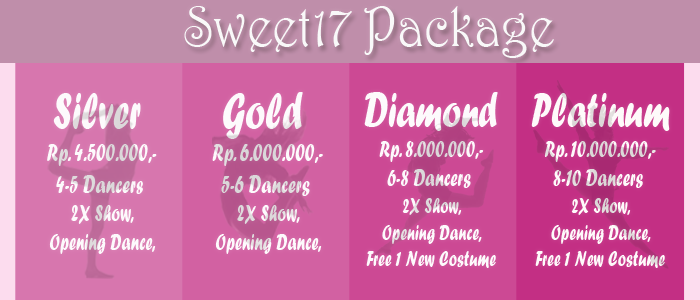
<style>
.page{position:relative;width:700px;height:300px}
.page>*{position:absolute;margin:0}
.t1{font:57.4px "Harrington";color:#f9f9f9;scale:0.89 1}
.t2{font:26.5px "ForteMT";color:#fdfafc;scale:0.69 1}
.t3{font:53.2px "ForteMT";color:#fdfafc;scale:0.69 1}
.t4{font:23.8px "ForteMT";color:#fdfafc;scale:0.69 1}
.t5{font:22.2px "ForteMT";color:#fdfafc;scale:0.7 1}
.t6{font:49.6px "ForteMT";color:#fdfafc;scale:0.7 1}
.t7{font:24.7px "ForteMT";color:#fdfafc;scale:0.7 1}
.t8{font:22.2px "ForteMT";color:#fefafa;scale:0.7 1}
.t9{font:49.6px "ForteMT";color:#fefafa;scale:0.7 1}
.t10{font:24.7px "ForteMT";color:#fefafa;scale:0.7 1}
</style>
<div class="page">
<p class="t1" style="left:184px;top:6px;width:370px;height:52px">Sweet17 Package</p>
<p class="t2" style="left:47px;top:93px;width:110px;height:161px;text-align:center"><span class="t3">Silver <br></span>Rp. 4.500.000,-<br>4-5 Dancer<span class="t4">s <br>2X Show,<br>Opening Dance,</span></p>
<p class="t2" style="left:212px;top:92px;width:111px;height:162px;text-align:center"><span class="t3">Gold <br></span>Rp. 6.000.000,-<br>5-6 Dancers<span class="t4"> <br>2X Show,<br>Opening Dance,</span></p>
<p class="t5" style="left:364px;top:92px;width:134px;height:176px;text-align:center"><span class="t6">Diamond<br></span><span class="t7">Rp. 8.000.000,-<br>6-8 Dancers</span> <br>2X Show,<br>Opening Dance,<br>Free 1 New Costume</p>
<p class="t8" style="left:531px;top:93px;width:139px;height:175px;text-align:center"><span class="t9">Platinum<br></span><span class="t10">Rp. 10.000.000,-<br>8-10 Dancers</span> <br>2X Show,<br>Opening Dance,<br>Free 1 New Costume</p>
</div>
